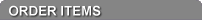
<style>
.page{position:relative;width:202px;height:20px;background:#858585}
.page>*{position:absolute;margin:0}
.t1{font:13.3px "Arial-BoldMT";color:#ffffff}
</style>
<div class="page">
<p class="t1" style="left:9px;top:5px;width:92px;height:11px">ORDER ITEMS</p>
</div>
